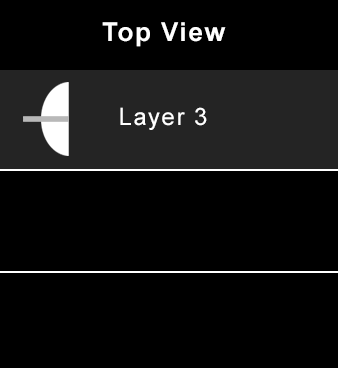
<style>
.page{position:relative;width:338px;height:368px;background:#000000}
.page>*{position:absolute;margin:0}
.t1{font:26px "Arial-BoldMT";letter-spacing:0.06em;color:#ffffff}
.t2{font:24px "ArialMT";letter-spacing:0.06em;color:#ffffff}
</style>
<div class="page">
<p class="t1" style="left:102px;top:22px;width:124px;height:25px">Top View</p>
<p class="t2" style="left:120px;top:107px;width:87px;height:23px">Layer 3</p>
</div>
